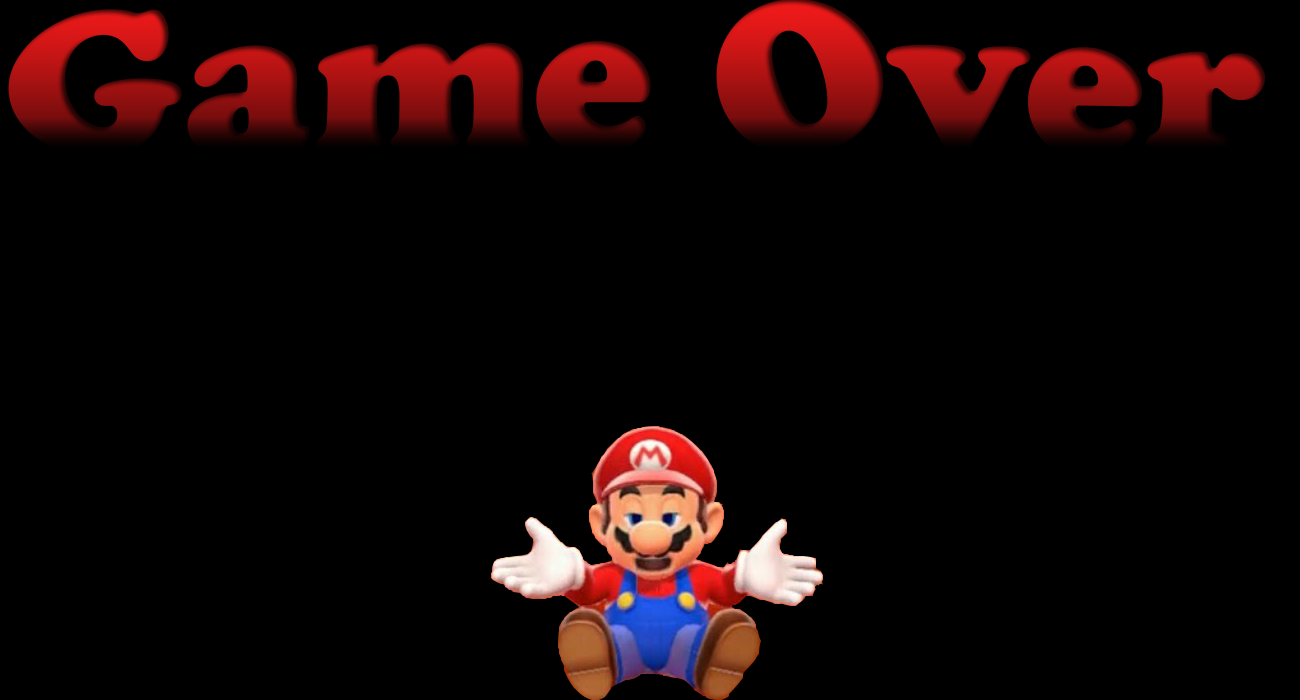
<style>
.page{position:relative;width:1300px;height:700px;background:#000000}
.page>*{position:absolute;margin:0}
.t1{font:200px "CooperBlack"}
</style>
<div class="page">
<p class="t1" style="left:8px;top:0px;width:1258px;height:157px">Game Over</p>
</div>
